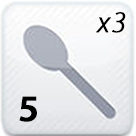
<style>
.page{position:relative;width:136px;height:136px}
.page>*{position:absolute;margin:0}
.t1{font:30.2px "MyriadPro-LightIt";letter-spacing:0.05em;color:#000000;font-weight:bold}
.t2{font:37.8px "MyriadPro-Semibold";letter-spacing:0.05em;color:#000000;font-weight:bold}
</style>
<div class="page">
<p class="t1" style="left:96px;top:12px;width:30px;height:21px">x3</p>
<p class="t2" style="left:19px;top:96px;width:18px;height:26px">5</p>
</div>
